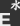
<style>
.page{position:relative;width:20px;height:26px;background:#333333}
.page>*{position:absolute;margin:0}
.t1{font:12px "DFKaiShu-SB-Estd-BF";color:#ececec;font-weight:bold}
.t2{font:18px "ArialMT";color:#ececec;font-weight:bold}
</style>
<div class="page">
<p class="t1" style="left:10px;top:0px;width:12px;height:11px">水</p>
<p class="t2" style="left:0px;top:13px;width:11px;height:14px">E</p>
</div>
